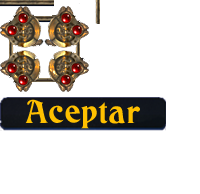
<style>
.page{position:relative;width:200px;height:194px;background:#ffffff}
.page>*{position:absolute;margin:0}
.t1{font:30px "Columbus";color:#ffc000}
</style>
<div class="page">
<p class="t1" style="left:25px;top:99px;width:115px;height:30px">Aceptar</p>
</div>
